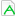
<style>
.page{position:relative;width:16px;height:16px;background:#fcfcfc}
.page>*{position:absolute;margin:0}
.t1{font:14px "TektonPro-BoldExt";color:#00c52a}
</style>
<div class="page">
<p class="t1" style="left:3px;top:5px;width:12px;height:10px">A</p>
</div>
